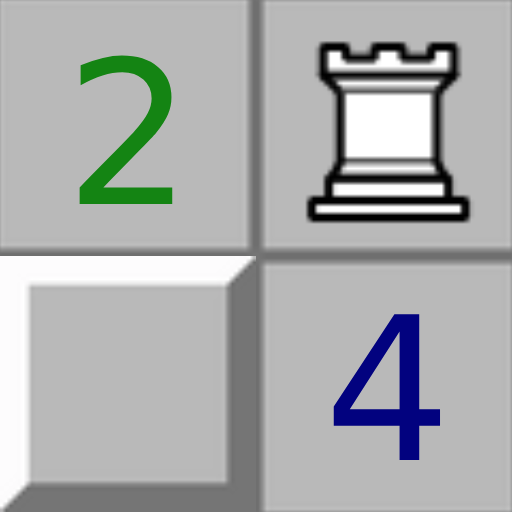
<style>
.page{position:relative;width:512px;height:512px;background:#b9b9b9}
.page>*{position:absolute;margin:0}
.t1{font:200px "DejaVuSans";color:#148413}
.t2{font:200px "DejaVuSans";color:#02027f}
</style>
<div class="page">
<p class="t1" style="left:79px;top:55px;width:94px;height:149px">2</p>
<p class="t2" style="left:333px;top:314px;width:108px;height:146px">4</p>
</div>
